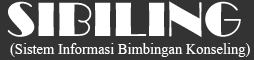
<style>
.page{position:relative;width:254px;height:60px;background:#333333}
.page>*{position:absolute;margin:0}
.t1{font:50px "Broadway";color:#ffffff}
.t2{font:18px "Aparajita";color:#ffffff}
</style>
<div class="page">
<p class="t1" style="left:7px;top:1px;width:234px;height:37px">SIBILING</p>
<p class="t2" style="left:10px;top:43px;width:240px;height:14px">(Sistem Informasi Bimbingan Konseling)</p>
</div>
